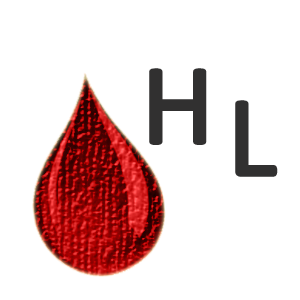
<style>
.page{position:relative;width:300px;height:300px;background:#ffffff}
.page>*{position:absolute;margin:0}
.t1{font:115px/32px "Calibri";letter-spacing:0.06em;color:#313030;font-weight:bold}
</style>
<div class="page">
<p class="t1" style="left:149px;top:68px;width:129px;height:109px;text-align:center">H<br>    L</p>
</div>
